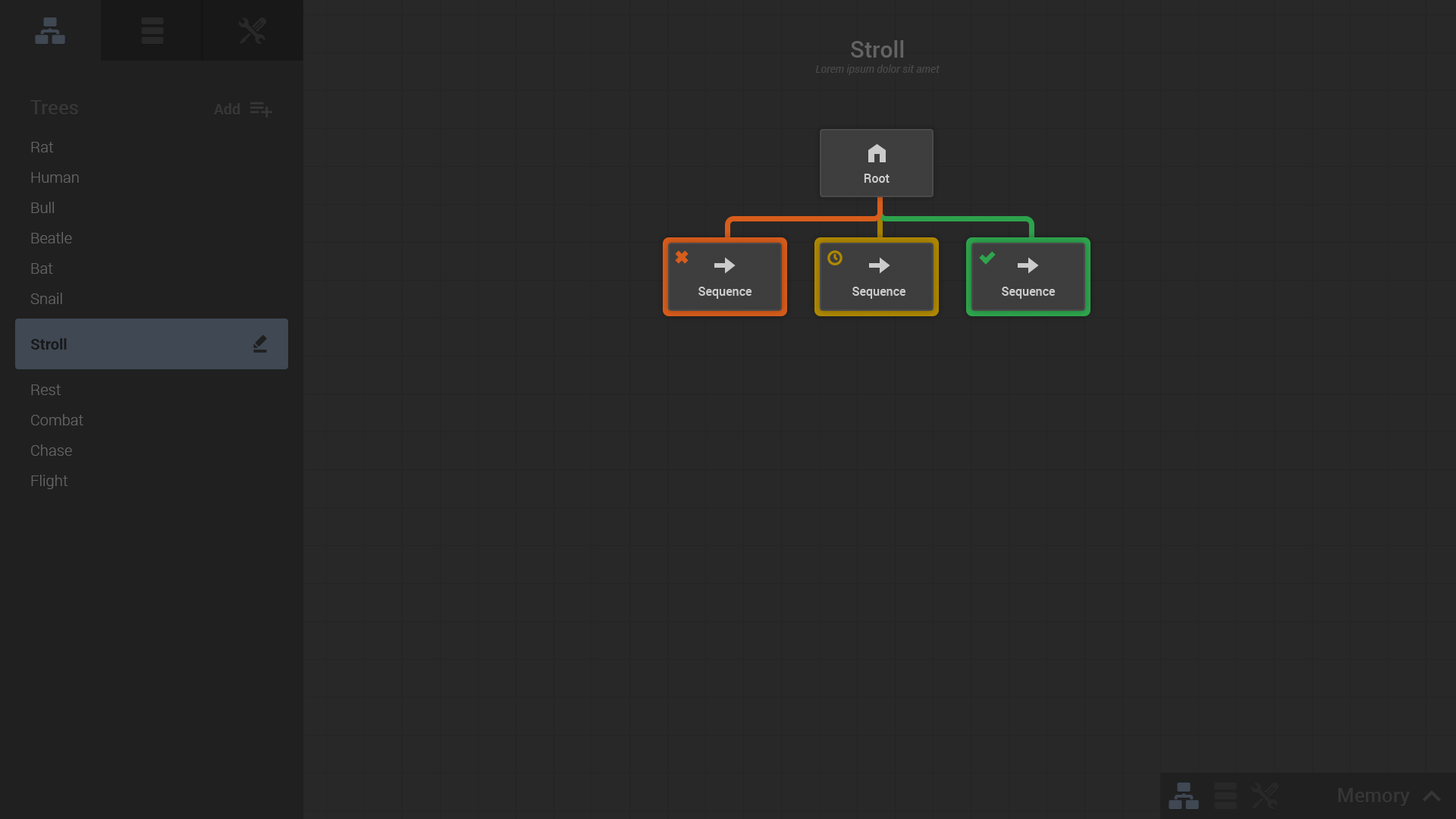
<style>
.page{position:relative;width:1456px;height:819px;background:#282828}
.page>*{position:absolute;margin:0}
.t1{font:22.7px "Roboto-Medium";color:#646363}
.t2{font:10.6px "Roboto-Italic";color:#4a4949}
.t3{font:19.7px "Roboto-Medium";color:#363636}
.t4{font:15.2px "Roboto-Bold";color:#363636}
.t5{font:15.2px/30.3px "Roboto-Light";color:#636363}
.t6{font:15.2px/30.3px "Roboto-Bold";color:#181818}
</style>
<div class="page">
<p class="t1" style="left:851px;top:40px;width:53px;height:18px">Stroll</p>
<p class="t2" style="left:815px;top:64px;width:125px;height:11px">Lorem ipsum dolor sit amet</p>
<p class="t3" style="left:30px;top:100px;width:48px;height:15px">Trees</p>
<p class="t4" style="left:214px;top:103px;width:26px;height:12px">Add</p>
<p class="t5" style="left:30px;top:142px;width:53px;height:347px">Rat<br>Human<br>Bull<br>Beatle<br>Bat<br>Snail<br><span class="t6">Stroll<br></span>Rest<br>Combat<br>Chase<br>Flight</p>
<p class="t3" style="left:1338px;top:788px;width:72px;height:18px">Memory</p>
</div>
